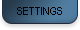
<style>
.page{position:relative;width:80px;height:30px}
.page>*{position:absolute;margin:0}
.t1{font:11px "ArialNarrow";color:#010101}
</style>
<div class="page">
<p class="t1" style="left:17px;top:7px;width:45px;height:8px">SETTINGS</p>
</div>
